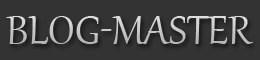
<style>
.page{position:relative;width:260px;height:60px;background:#333333}
.page>*{position:absolute;margin:0}
.t1{font:50px "Gabriola";color:#c8c8c8;text-transform:uppercase}
</style>
<div class="page">
<p class="t1" style="left:6px;top:16px;width:247px;height:28px">Blog-Master</p>
</div>
